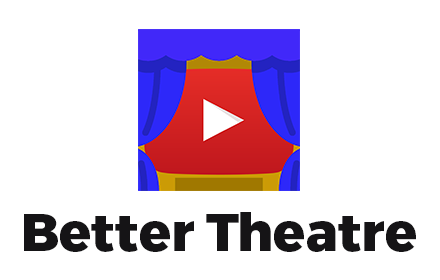
<style>
.page{position:relative;width:440px;height:280px;background:#ffffff}
.page>*{position:absolute;margin:0}
.t1{font:52.9px "Montserrat-ExtraBold";color:#151416}
</style>
<div class="page">
<p class="t1" style="left:24px;top:212px;width:392px;height:40px">Better Theatre</p>
</div>
